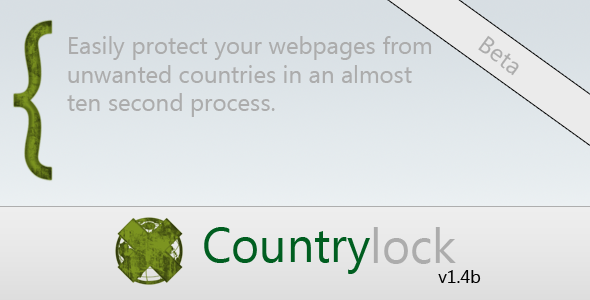
<style>
.page{position:relative;width:590px;height:300px}
.page>*{position:absolute;margin:0}
.t1{font:24px "Ebrima";color:#acacac}
</style>
<div class="page">
<p class="t1" style="left:67px;top:36px;width:365px;height:81px">Easily protect your webpages from<br>unwanted countries in an almost ten second process.</p>
</div>
